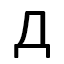
<style>
.page{position:relative;width:64px;height:64px;background:#ffffff}
.page>*{position:absolute;margin:0}
.t1{font:58.3px "Calibri";color:#000000}
</style>
<div class="page">
<p class="t1" style="left:14px;top:11px;width:36px;height:47px">Д</p>
</div>
